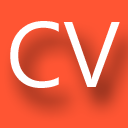
<style>
.page{position:relative;width:128px;height:128px;background:#ff5533}
.page>*{position:absolute;margin:0}
.t1{font:92.9px "SegoeUI";color:#ffffff}
</style>
<div class="page">
<p class="t1" style="left:10px;top:21px;width:110px;height:67px">CV</p>
</div>
